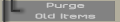
<style>
.page{position:relative;width:120px;height:22px;background:#828282}
.page>*{position:absolute;margin:0}
.t1{font:9px "Axaxaxregular";letter-spacing:0.01em;color:#cbcbcb;scale:1.5 1}
</style>
<div class="page">
<p class="t1" style="left:35px;top:2px;width:61px;height:17px;text-align:center">Purge<br>Old Items</p>
</div>
